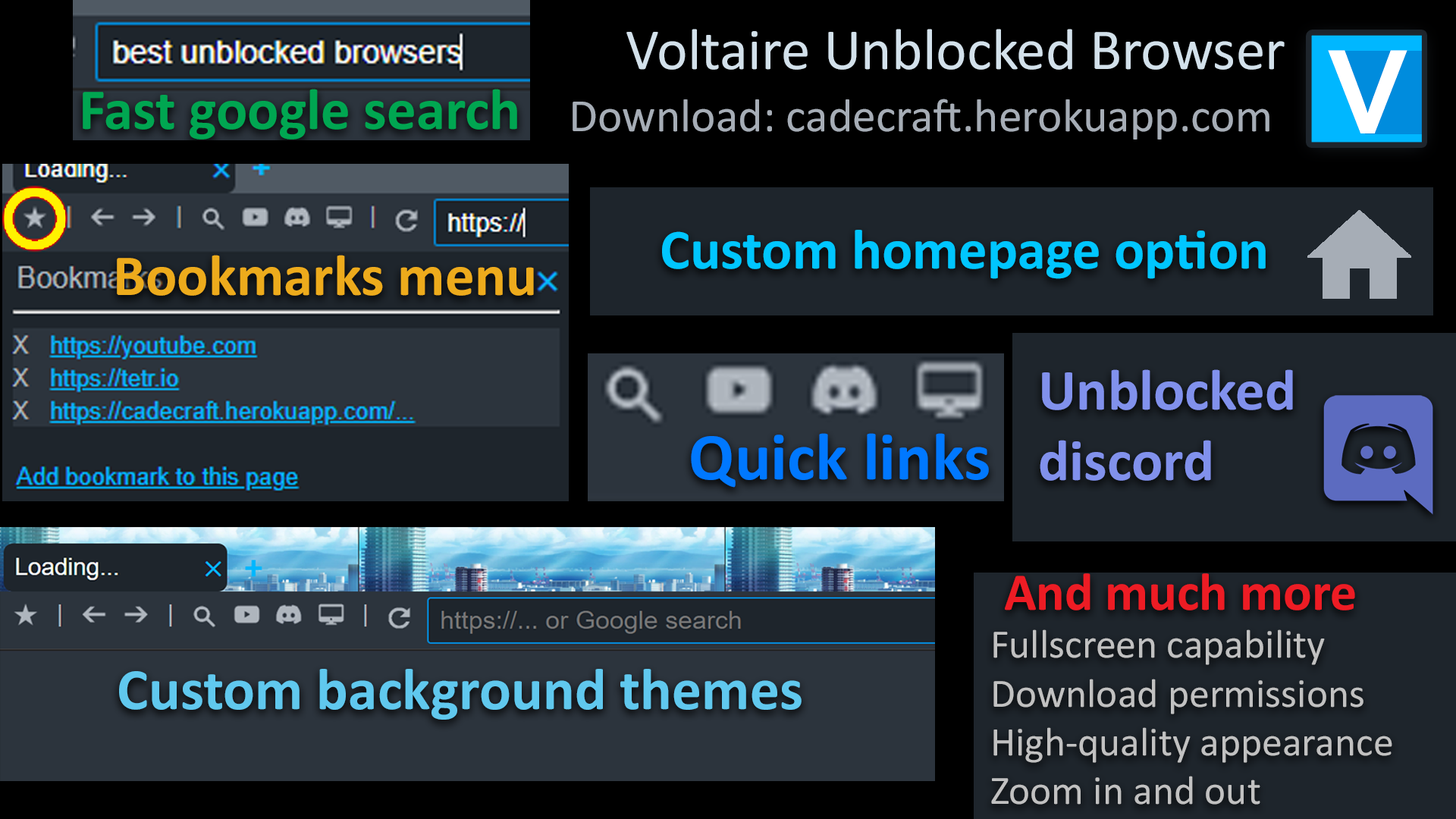
<style>
.page{position:relative;width:1456px;height:819px;background:#000000}
.page>*{position:absolute;margin:0}
.t1{font:58.6px "Calibri";color:#d3e1eb}
.t2{font:58.4px "Calibri-Bold";color:#00a651}
.t3{font:46.9px "Calibri";color:#a6adb6}
.t4{font:56.9px "Calibri-Bold";color:#00c6ff}
.t5{font:58.4px "Calibri-Bold";color:#edab1c}
.t6{font:58.4px "Calibri-Bold";color:#8191ec}
.t7{font:67.3px "Calibri-Bold";color:#0078ff}
.t8{font:53.2px "Calibri-Bold";color:#ed1c24}
.t9{font:40.7px "Calibri";color:#c1c1c1}
.t10{font:59.2px "Calibri-Bold";color:#60c8ee}
</style>
<div class="page">
<p class="t1" style="left:626px;top:29px;width:659px;height:41px">Voltaire Unblocked Browser</p>
<p class="t2" style="left:83px;top:89px;width:434px;height:51px">Fast google search</p>
<p class="t3" style="left:573px;top:99px;width:696px;height:41px">Download: cadecraft.herokuapp.com</p>
<p class="t4" style="left:662px;top:230px;width:604px;height:49px">Custom homepage option</p>
<p class="t5" style="left:117px;top:255px;width:417px;height:41px">Bookmarks menu</p>
<p class="t6" style="left:1040px;top:369px;width:253px;height:112px">Unblocked<br>discord</p>
<p class="t7" style="left:691px;top:433px;width:298px;height:55px">Quick links</p>
<p class="t8" style="left:1005px;top:573px;width:350px;height:37px">And much more</p>
<p class="t9" style="left:991px;top:629px;width:401px;height:176px">Fullscreen capability<br>Download permissions<br>High-quality appearance<br>Zoom in and out</p>
<p class="t10" style="left:119px;top:669px;width:683px;height:51px">Custom background themes</p>
</div>
